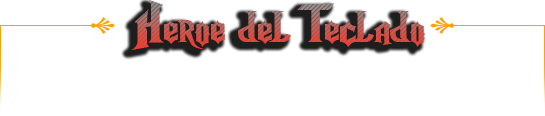
<style>
.page{position:relative;width:545px;height:116px;background:#ffffff}
.page>*{position:absolute;margin:0}
.t1{font:56px "NightmareHero"}
</style>
<div class="page">
<p class="t1" style="left:131px;top:0px;width:295px;height:50px">Heroe del Teclado</p>
</div>
